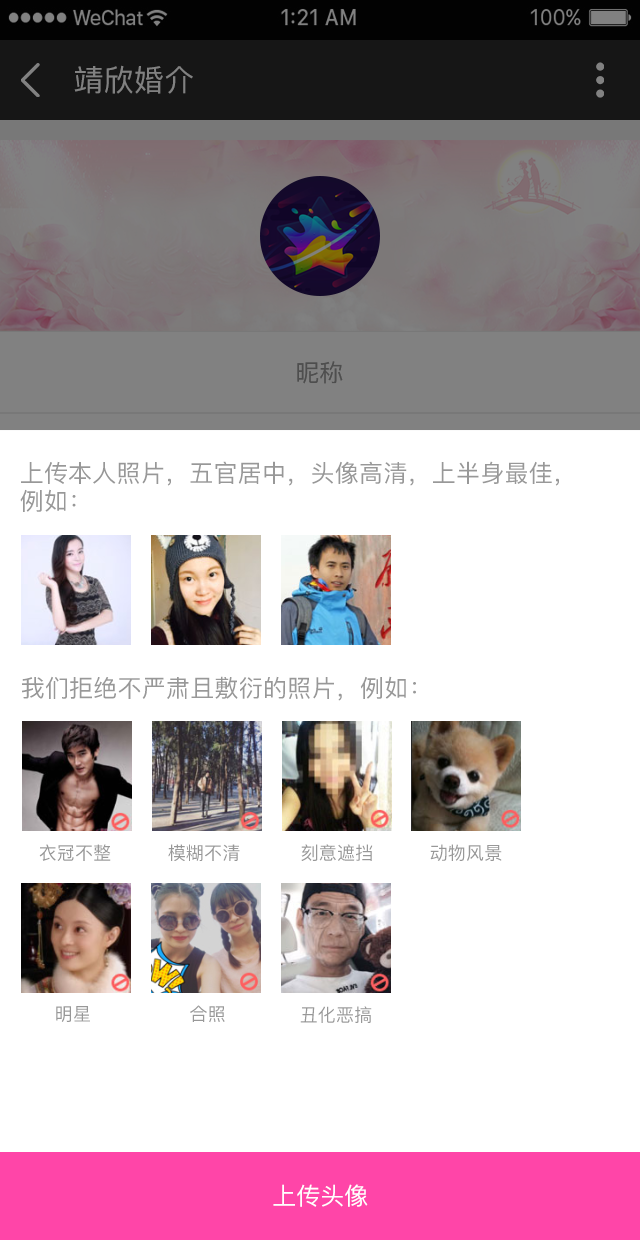
<style>
.page{position:relative;width:640px;height:1240px;background:#ffffff}
.page>*{position:absolute;margin:0}
.t1{font:30px "PingFang-SC-Medium";letter-spacing:0.01em;color:#818181;text-transform:uppercase}
.t2{font:24px "PingFang-SC-Medium";color:#4e4e4e;text-transform:uppercase}
.t3{font:24px "PingFang-SC-Medium";letter-spacing:0.01em;color:#989898;text-transform:uppercase}
.t4{font:18px "PingFang-SC-Medium";letter-spacing:0.01em;color:#989898;text-transform:uppercase}
.t5{font:24px "PingFang-SC-Medium";color:#ffffff;text-transform:uppercase}
</style>
<div class="page">
<p class="t1" style="left:74px;top:65px;width:119px;height:29px">靖欣婚介</p>
<p class="t2" style="left:297px;top:361px;width:46px;height:23px">昵称</p>
<p class="t3" style="left:20px;top:461px;width:539px;height:51px">上传本人照片，五官居中，头像高清，上半身最佳，<br>例如：</p>
<p class="t3" style="left:22px;top:676px;width:394px;height:25px">我们拒绝不严肃且敷衍的照片，例如：</p>
<p class="t4" style="left:39px;top:844px;width:72px;height:17px">衣冠不整</p>
<p class="t4" style="left:168px;top:844px;width:72px;height:17px">模糊不清</p>
<p class="t4" style="left:301px;top:844px;width:72px;height:17px">刻意遮挡</p>
<p class="t4" style="left:430px;top:844px;width:72px;height:17px">动物风景</p>
<p class="t4" style="left:56px;top:1006px;width:34px;height:16px">明星</p>
<p class="t4" style="left:190px;top:1005px;width:35px;height:18px">合照</p>
<p class="t4" style="left:300px;top:1006px;width:72px;height:17px">丑化恶搞</p>
<p class="t5" style="left:273px;top:1184px;width:95px;height:23px">上传头像</p>
</div>
